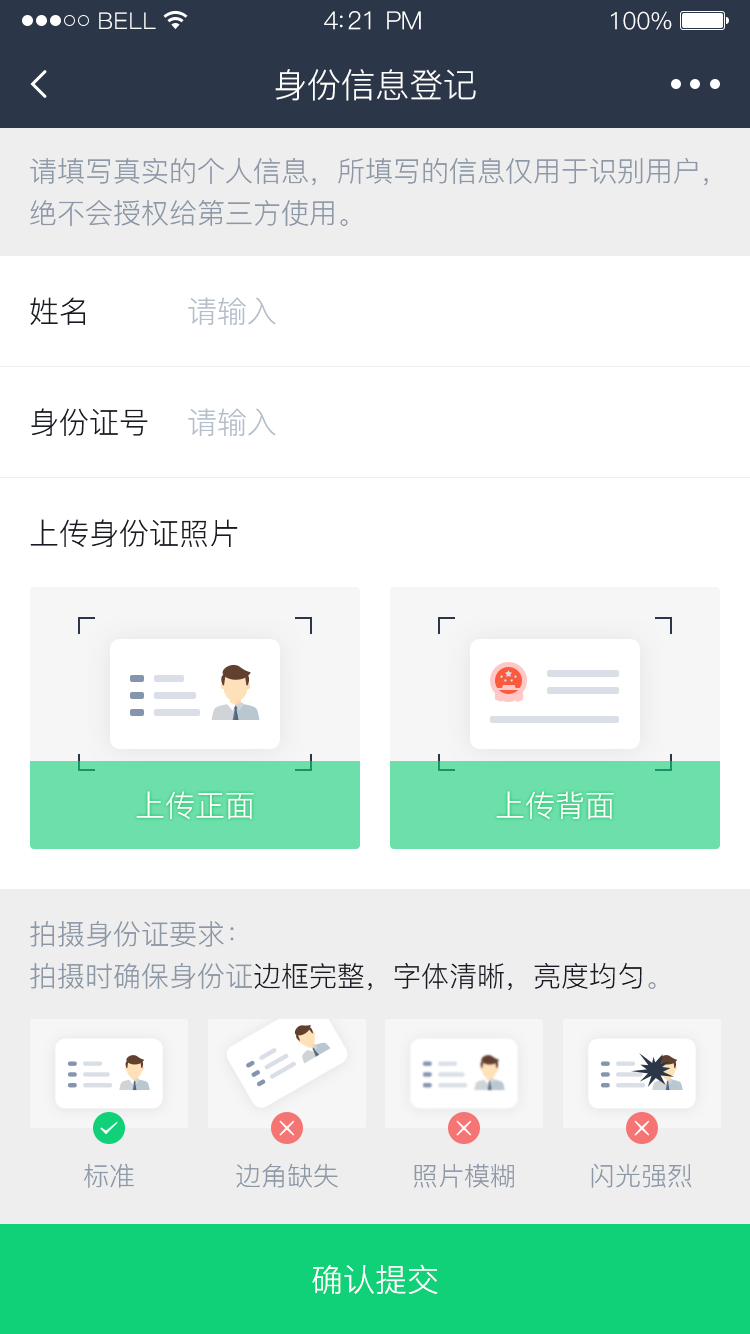
<style>
.page{position:relative;width:750px;height:1334px;background:#ffffff}
.page>*{position:absolute;margin:0}
.t1{font:23px "PingFang-SC-Regular";letter-spacing:0.02em;color:#ffffff}
.t2{font:25px "PingFang-SC-Regular";letter-spacing:-0.02em;color:#ffffff}
.t3{font:24px "PingFang-SC-Regular";letter-spacing:-0.02em;color:#ffffff}
.t4{font:34px "PingFang-SC-Regular";color:#ffffff}
.t5{font:28px/42px "PingFang-SC-Regular";color:#8d98a7}
.t6{font:30px "PingFang-SC-Regular";color:#181b23}
.t7{font:30px "PingFang-SC-Regular";color:#b5becb}
.t8{font:30px "PingFang-SC-Regular";color:#ffffff}
.t9{font:28px/42px "PingFang-SC-Regular";color:#181b23}
.t10{font:26px "PingFang-SC-Regular";color:#8d98a7}
.t11{font:32px "PingFang-SC-Regular";color:#ffffff}
</style>
<div class="page">
<p class="t1" style="left:99px;top:12px;width:57px;height:17px">BELL</p>
<p class="t2" style="left:324px;top:11px;width:97px;height:19px">4:21 PM</p>
<p class="t3" style="left:611px;top:11px;width:61px;height:19px">100%</p>
<p class="t4" style="left:275px;top:69px;width:201px;height:32px">身份信息登记</p>
<p class="t5" style="left:30px;top:158px;width:678px;height:68px">请填写真实的个人信息，所填写的信息仅用于识别用户，<br>绝不会授权给第三方使用。</p>
<p class="t6" style="left:30px;top:297px;width:55px;height:28px">姓名</p>
<p class="t7" style="left:188px;top:297px;width:88px;height:28px">请输入</p>
<p class="t6" style="left:31px;top:408px;width:117px;height:28px">身份证号</p>
<p class="t7" style="left:188px;top:408px;width:88px;height:28px">请输入</p>
<p class="t6" style="left:30px;top:519px;width:208px;height:28px">上传身份证照片</p>
<p class="t8" style="left:136px;top:791px;width:118px;height:28px">上传正面</p>
<p class="t8" style="left:496px;top:791px;width:118px;height:28px">上传背面</p>
<p class="t5" style="left:30px;top:921px;width:626px;height:70px">拍摄身份证要求：<br>拍摄时确保身份证<span class="t9">边框完整，字体清晰，亮度均匀</span>。</p>
<p class="t10" style="left:84px;top:1163px;width:50px;height:25px">标准</p>
<p class="t10" style="left:236px;top:1163px;width:102px;height:25px">边角缺失</p>
<p class="t10" style="left:414px;top:1163px;width:100px;height:25px">照片模糊</p>
<p class="t10" style="left:591px;top:1163px;width:101px;height:25px">闪光强烈</p>
<p class="t11" style="left:312px;top:1264px;width:126px;height:30px">确认提交</p>
</div>
